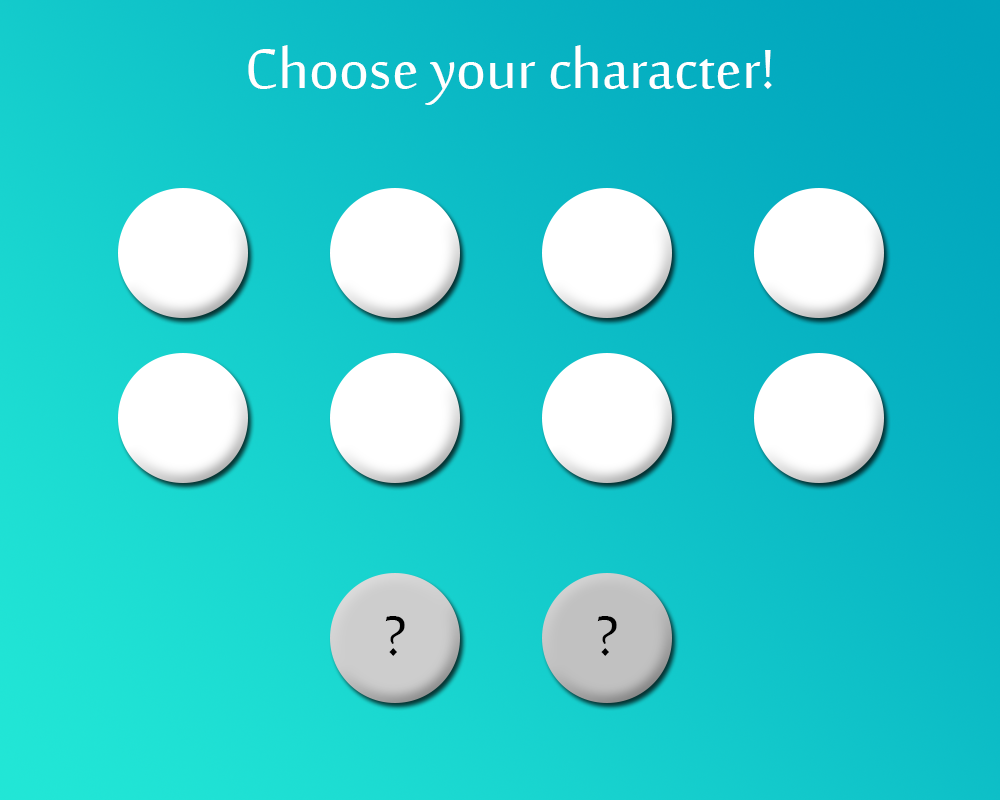
<style>
.page{position:relative;width:1000px;height:800px}
.page>*{position:absolute;margin:0}
.t1{font:75px "SakkalMajalla";color:#ffffff}
.t2{font:75px "SakkalMajalla";color:#000000}
</style>
<div class="page">
<p class="t1" style="left:248px;top:45px;width:524px;height:60px">Choose your character!</p>
<p class="t2" style="left:385px;top:616px;width:20px;height:40px">?</p>
<p class="t2" style="left:597px;top:616px;width:20px;height:40px">?</p>
</div>
